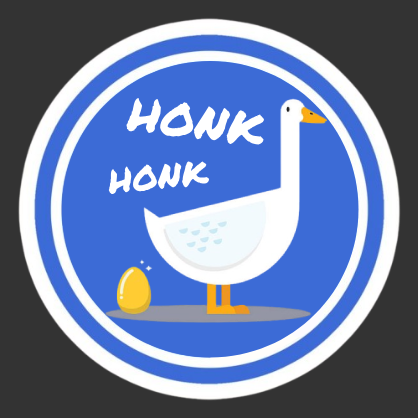
<style>
.page{position:relative;width:418px;height:418px;background:#333333}
.page>*{position:absolute;margin:0}
.t1{font:47.1px "PermanentMarker-Regular";color:#ffffff}
.t2{font:34.4px "PermanentMarker-Regular";color:#ffffff}
</style>
<div class="page">
<p class="t1" style="left:126px;top:98px;width:138px;height:47px;rotate:7deg">HONK</p>
<p class="t2" style="left:108px;top:161px;width:101px;height:33px;rotate:-5deg">HONK</p>
</div>
